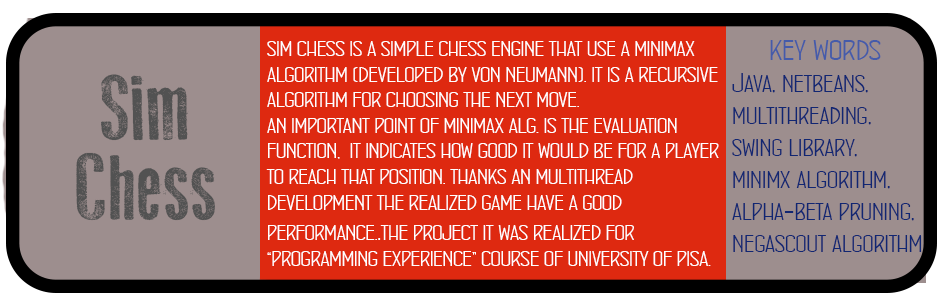
<style>
.page{position:relative;width:945px;height:302px;background:#9d8e8e}
.page>*{position:absolute;margin:0}
.t1{font:21.3px "ConcursoItalianBTNWide";color:#ffffff}
.t2{font:25.3px "ConcursoItalianBTNWide";color:#ffffff}
.t3{font:26.7px "ConcursoItalianBTNWide";color:#112672}
.t4{font:32px "ConcursoItalianBTNWide";color:#455baa}
.t5{font:93.3px "OldPress";color:#525252}
.t6{font:80px "ConcursoItalianBTNWide";color:#525252}
</style>
<div class="page">
<p class="t1" style="left:266px;top:41px;width:453px;height:225px">SIM CHESS IS A SIMPLE CHESS ENGINE THAT USE A MINIMAX <br>ALGORITHM (DEVELOPED BY VON NEUMANN). IT IS A RECURSIVE <br>ALGORITHM FOR CHOOSING THE NEXT MOVE. <br>AN IMPORTANT POINT OF MINIMAX ALG. IS THE EVALUATION <br>FUNCTION,  IT INDICATES HOW GOOD IT WOULD BE FOR A PLAYER<br>TO REACH THAT POSITION. THANKS AN MULTITHREAD <br>DEVELOPMENT THE REALIZED GAME HAVE A GOOD <br>PERFORMANCE.<span class="t2">.</span>THE PROJECT IT WAS REALIZED FOR <br>“PROGRAMMING EXPERIENCE” COURSE OF UNIVERSITY OF PISA.</p>
<p class="t3" style="left:732px;top:40px;width:190px;height:212px"><span class="t4">     key words<br></span>Java, netbeans, <br>multithreading, <br>swing library, <br>minimx algorithm, <br>alpha-beta pruning,<br>negascout algorithm</p>
<p class="t5" style="left:101px;top:74px;width:88px;height:67px"><span class="t6"> </span>Sim</p>
<p class="t5" style="left:76px;top:152px;width:139px;height:69px">Chess</p>
</div>
